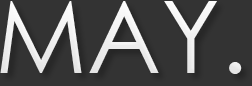
<style>
.page{position:relative;width:252px;height:86px;background:#333333}
.page>*{position:absolute;margin:0}
.t1{font:100px "CenturyGothic";color:#ffffff}
</style>
<div class="page">
<p class="t1" style="left:0px;top:1px;width:242px;height:73px">MAY.</p>
</div>
